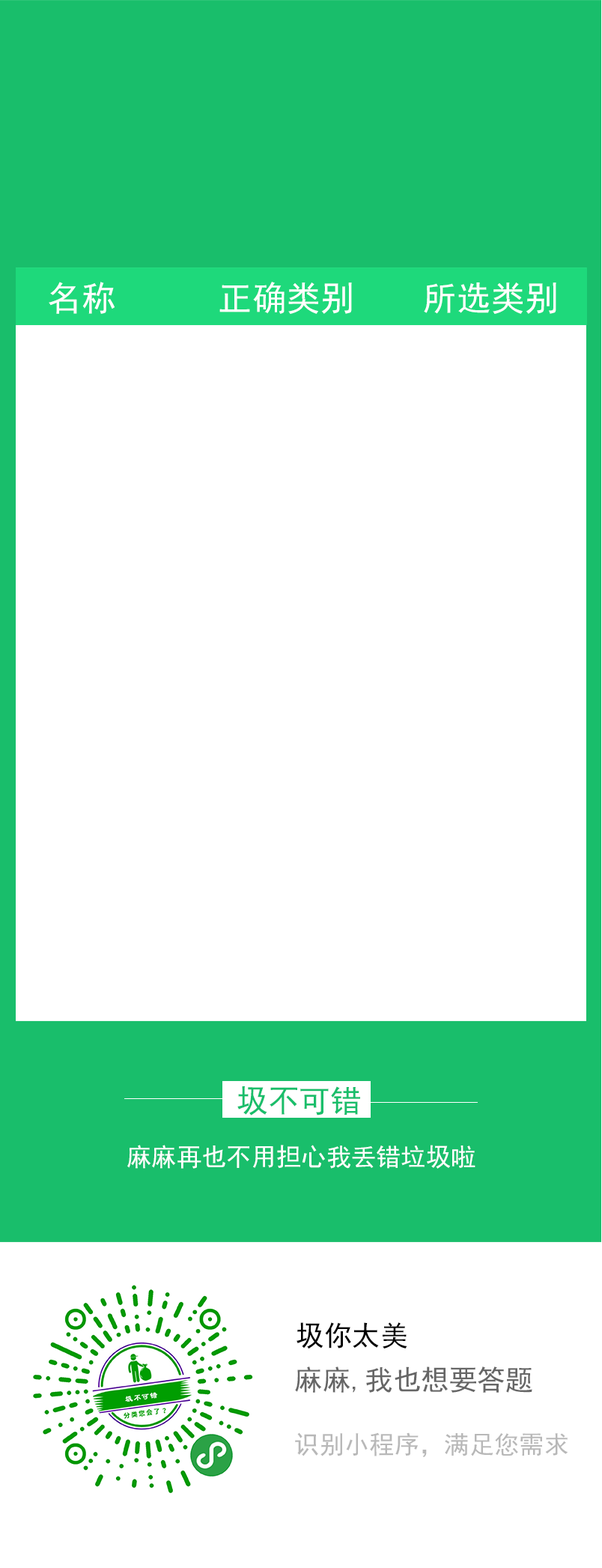
<style>
.page{position:relative;width:602px;height:1568px;background:#ffffff}
.page>*{position:absolute;margin:0}
.t1{font:34.2px "SimHei";color:#ffffff}
.t2{font:31.3px "SimHei";color:#19be6b}
.t3{font:25px "SimHei";color:#ffffff}
.t4{font:28.1px "SimHei";color:#000000}
.t5{font:28.1px "SimHei";color:#666666}
.t6{font:25px "SimHei";color:#b8b8b8}
</style>
<div class="page">
<p class="t1" style="left:49px;top:282px;width:66px;height:32px">名称</p>
<p class="t1" style="left:220px;top:282px;width:132px;height:32px">正确类别</p>
<p class="t1" style="left:424px;top:282px;width:133px;height:32px">所选类别</p>
<p class="t2" style="left:237px;top:1086px;width:123px;height:30px">圾不可错</p>
<p class="t3" style="left:127px;top:1145px;width:349px;height:24px">麻麻再也不用担心我丢错垃圾啦</p>
<p class="t4" style="left:297px;top:1322px;width:111px;height:27px">圾你太美</p>
<p class="t5" style="left:295px;top:1366px;width:238px;height:27px">麻麻,我也想要答题</p>
<p class="t6" style="left:295px;top:1432px;width:274px;height:25px">识别小程序，满足您需求</p>
</div>
